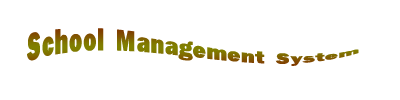
<style>
.page{position:relative;width:400px;height:100px;background:#ffffff}
.page>*{position:absolute;margin:0}
.t1{font:24px "FranklinGothic-Heavy";color:#806f00}
</style>
<div class="page">
<p class="t1" style="left:27px;top:28px;width:332px;height:38px">School  Management  System</p>
</div>
